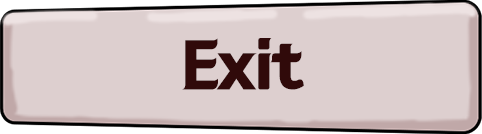
<style>
.page{position:relative;width:482px;height:134px;background:#ddcfcf}
.page>*{position:absolute;margin:0}
.t1{font:70.4px "TTHayanbaramB";letter-spacing:-0.05em;color:#300a0a}
</style>
<div class="page">
<p class="t1" style="left:182px;top:38px;width:122px;height:52px">Exit</p>
</div>
